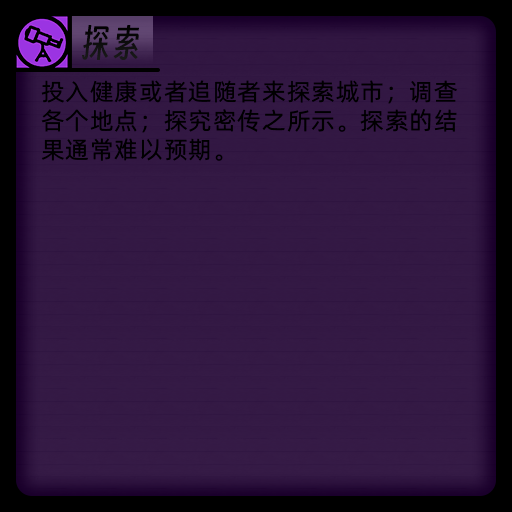
<style>
.page{position:relative;width:512px;height:512px}
.page>*{position:absolute;margin:0}
.t1{font:36px "SmileySans-Oblique";letter-spacing:0.04em;color:#000000}
.t2{font:24px "AlibabaPuHuiTiR";letter-spacing:0.04em;color:#000000}
</style>
<div class="page">
<p class="t1" style="left:82px;top:25px;width:57px;height:35px">探索</p>
<p class="t2" style="left:41px;top:80px;width:416px;height:81px">投入健康或者追随者来探索城市；调查<br>各个地点；探究密传之所示。探索的结<br>果通常难以预期。</p>
</div>
